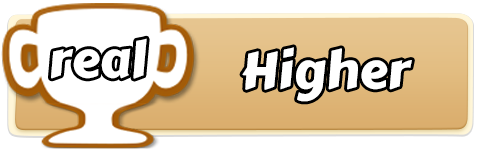
<style>
.page{position:relative;width:477px;height:155px;background:#ffffff}
.page>*{position:absolute;margin:0}
.t1{font:50.9px "CarterOne";color:#ffffff}
</style>
<div class="page">
<p class="t1" style="left:51px;top:38px;width:96px;height:41px">real</p>
<p class="t1" style="left:242px;top:47px;width:170px;height:55px">Higher!</p>
</div>
